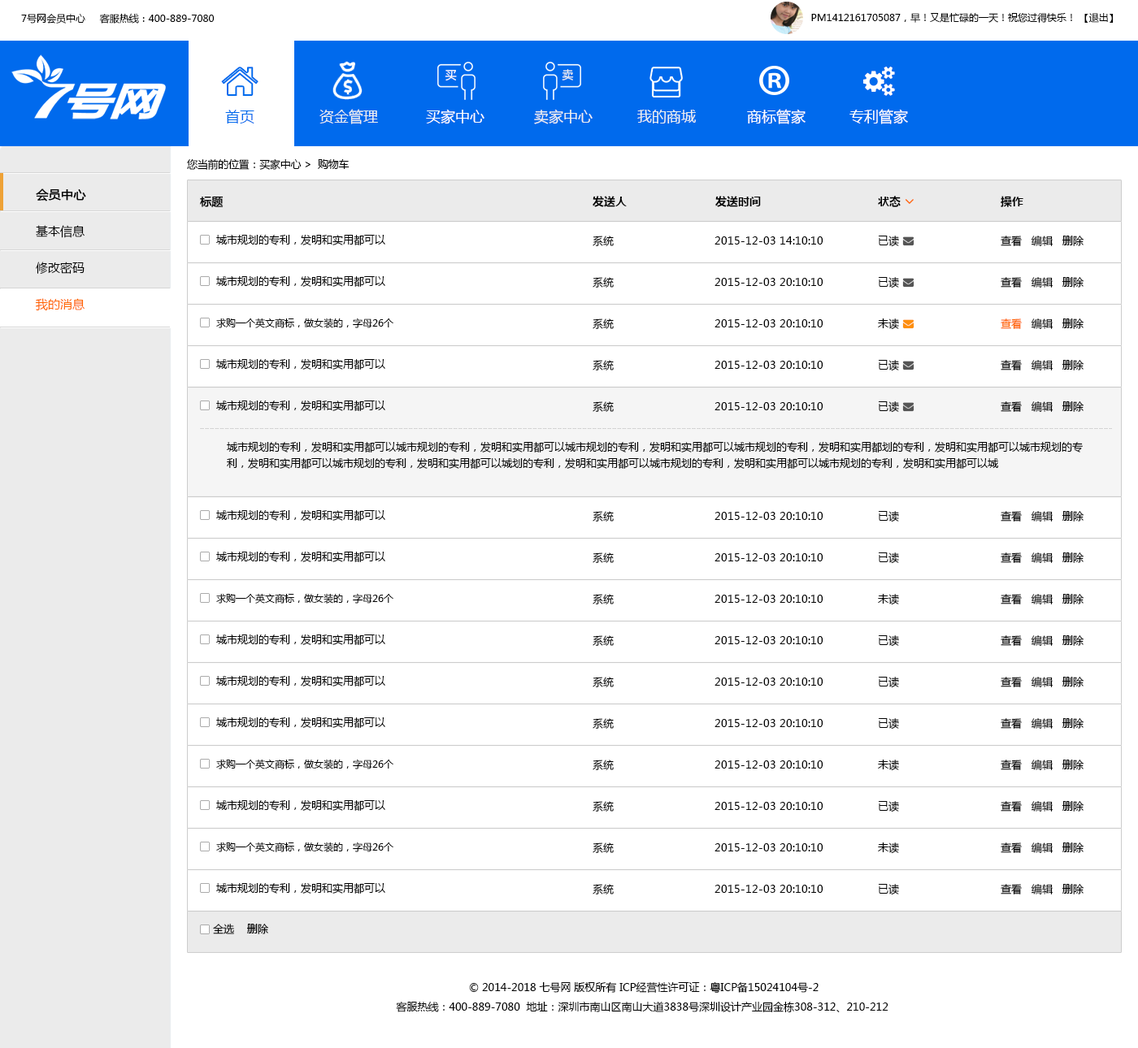
<style>
.page{position:relative;width:1138px;height:1048px;background:#ffffff}
.page>*{position:absolute;margin:0}
.t1{font:9.8px "MicrosoftYaHei";color:#000000}
.t2{font:11.4px "MicrosoftYaHei";color:#ffffff}
.t3{font:11.4px "MicrosoftYaHei";color:#ecf0f1}
.t4{font:14.6px "MicrosoftYaHei";color:#006aed}
.t5{font:14.6px "MicrosoftYaHei";color:#ecf0f1}
.t6{font:14.6px "MicrosoftYaHei";color:#ffffff}
.t7{font:10.6px "MicrosoftYaHei";letter-spacing:-0.02em;color:#000000}
.t8{font:12.2px/36.6px "MicrosoftYaHei";color:#000000}
.t9{font:12.2px/36.6px "MicrosoftYaHei";color:#000000;font-weight:bold}
.t10{font:12.2px/36.6px "MicrosoftYaHei";color:#ff6600}
.t11{font:11.4px "MicrosoftYaHei";color:#000000;font-weight:bold}
.t12{font:11.4px "MicrosoftYaHei-Bold";color:#000000}
.t13{font:10.6px "MicrosoftYaHei";color:#000000}
.t14{font:10.6px "MicrosoftYaHei";color:#ff6600}
.t15{font:10.6px/16.3px "MicrosoftYaHei";color:#000000}
.t16{font:10.6px/19.5px "MicrosoftYaHei";color:#000000}
</style>
<div class="page">
<p class="t1" style="left:21px;top:13px;width:194px;height:11px">7号网会员中心     客服热线：400-889-7080</p>
<p class="t1" style="left:811px;top:13px;width:302px;height:10px">PM1412161705087，早！又是忙碌的一天！祝您过得快乐！ 【退出】</p>
<p class="t2" style="left:444px;top:70px;width:13px;height:11px">买</p>
<p class="t3" style="left:561px;top:69px;width:13px;height:11px">卖</p>
<p class="t4" style="left:225px;top:110px;width:29px;height:14px">首页</p>
<p class="t5" style="left:319px;top:109px;width:59px;height:15px">资金管理</p>
<p class="t6" style="left:426px;top:109px;width:58px;height:15px">买家中心</p>
<p class="t5" style="left:534px;top:109px;width:58px;height:15px">卖家中心</p>
<p class="t5" style="left:637px;top:110px;width:59px;height:14px">我的商城</p>
<p class="t6" style="left:747px;top:109px;width:58px;height:15px">商标管家</p>
<p class="t6" style="left:849px;top:109px;width:59px;height:15px">专利管家</p>
<p class="t7" style="left:187px;top:158px;width:162px;height:12px">您当前的位置：买家中心 &gt;  购物车</p>
<p class="t8" style="left:35px;top:189px;width:51px;height:122px"><span class="t9">会员中心<br></span>基本信息<br>修改密码<br><span class="t10">我的消息</span></p>
<p class="t11" style="left:200px;top:196px;width:23px;height:12px">标题</p>
<p class="t12" style="left:592px;top:196px;width:34px;height:11px">发送人</p>
<p class="t12" style="left:715px;top:196px;width:46px;height:11px">发送时间</p>
<p class="t12" style="left:878px;top:196px;width:22px;height:11px">状态</p>
<p class="t12" style="left:1000px;top:196px;width:23px;height:11px">操作</p>
<p class="t13" style="left:216px;top:234px;width:169px;height:11px">城市规划的专利，发明和实用都可以</p>
<p class="t13" style="left:592px;top:236px;width:21px;height:10px">系统</p>
<p class="t13" style="left:714px;top:236px;width:109px;height:9px">2015-12-03 14:10:10</p>
<p class="t13" style="left:878px;top:236px;width:21px;height:11px">已读</p>
<p class="t13" style="left:1000px;top:236px;width:83px;height:10px">查看   编辑   删除</p>
<p class="t13" style="left:216px;top:275px;width:169px;height:12px"><span class="t14"> </span>城市规划的专利，发明和实用都可以</p>
<p class="t13" style="left:592px;top:277px;width:21px;height:11px">系统</p>
<p class="t13" style="left:714px;top:278px;width:109px;height:8px">2015-12-03 20:10:10</p>
<p class="t13" style="left:878px;top:277px;width:21px;height:11px">已读</p>
<p class="t13" style="left:1000px;top:277px;width:83px;height:11px">查看   编辑   删除</p>
<p class="t1" style="left:216px;top:318px;width:177px;height:10px"><span class="t14"> </span>求购一个英文商标，做女装的，字母26个</p>
<p class="t13" style="left:592px;top:319px;width:21px;height:10px">系统</p>
<p class="t13" style="left:714px;top:319px;width:109px;height:8px">2015-12-03 20:10:10</p>
<p class="t13" style="left:878px;top:319px;width:21px;height:11px">未读</p>
<p class="t13" style="left:1000px;top:319px;width:83px;height:10px"><span class="t14">查看 </span>  编辑   删除</p>
<p class="t13" style="left:216px;top:358px;width:169px;height:12px"><span class="t14"> </span>城市规划的专利，发明和实用都可以</p>
<p class="t13" style="left:592px;top:360px;width:21px;height:11px">系统</p>
<p class="t13" style="left:714px;top:361px;width:109px;height:8px">2015-12-03 20:10:10</p>
<p class="t13" style="left:878px;top:360px;width:21px;height:11px">已读</p>
<p class="t13" style="left:1000px;top:360px;width:83px;height:11px">查看   编辑   删除</p>
<p class="t13" style="left:216px;top:400px;width:169px;height:11px"><span class="t14"> </span>城市规划的专利，发明和实用都可以</p>
<p class="t13" style="left:592px;top:401px;width:21px;height:11px">系统</p>
<p class="t13" style="left:878px;top:401px;width:21px;height:12px">已读</p>
<p class="t13" style="left:1000px;top:401px;width:83px;height:11px">查看   编辑   删除</p>
<p class="t13" style="left:714px;top:402px;width:109px;height:8px">2015-12-03 20:10:10</p>
<p class="t15" style="left:227px;top:441px;width:855px;height:28px">城市规划的专利，发明和实用都可以城市规划的专利，发明和实用都可以城市规划的专利，发明和实用都可以城市规划的专利，发明和实用都划的专利，发明和实用都可以城市规划的专利，发明和实用都可以城市规划的专利，发明和实用都可以城划的专利，发明和实用都可以城市规划的专利，发明和实用都可以城市规划的专利，发明和实用都可以城</p>
<p class="t13" style="left:216px;top:509px;width:169px;height:12px">城市规划的专利，发明和实用都可以</p>
<p class="t13" style="left:592px;top:511px;width:21px;height:11px">系统</p>
<p class="t13" style="left:714px;top:512px;width:109px;height:8px">2015-12-03 20:10:10</p>
<p class="t13" style="left:878px;top:511px;width:21px;height:11px">已读</p>
<p class="t13" style="left:1000px;top:511px;width:83px;height:11px">查看   编辑   删除</p>
<p class="t13" style="left:216px;top:551px;width:169px;height:11px"><span class="t14"> </span>城市规划的专利，发明和实用都可以</p>
<p class="t13" style="left:592px;top:553px;width:21px;height:10px">系统</p>
<p class="t13" style="left:714px;top:553px;width:109px;height:8px">2015-12-03 20:10:10</p>
<p class="t13" style="left:878px;top:553px;width:21px;height:11px">已读</p>
<p class="t13" style="left:1000px;top:553px;width:83px;height:10px">查看   编辑   删除</p>
<p class="t1" style="left:216px;top:593px;width:177px;height:11px"><span class="t14"> </span>求购一个英文商标，做女装的，字母26个</p>
<p class="t13" style="left:592px;top:594px;width:21px;height:11px">系统</p>
<p class="t13" style="left:878px;top:594px;width:21px;height:11px">未读</p>
<p class="t13" style="left:1000px;top:594px;width:83px;height:11px">查看   编辑   删除</p>
<p class="t13" style="left:714px;top:595px;width:109px;height:8px">2015-12-03 20:10:10</p>
<p class="t13" style="left:216px;top:634px;width:169px;height:11px"><span class="t14"> </span>城市规划的专利，发明和实用都可以</p>
<p class="t13" style="left:592px;top:635px;width:21px;height:11px">系统</p>
<p class="t13" style="left:714px;top:636px;width:109px;height:8px">2015-12-03 20:10:10</p>
<p class="t13" style="left:878px;top:635px;width:21px;height:12px">已读</p>
<p class="t13" style="left:1000px;top:635px;width:83px;height:11px">查看   编辑   删除</p>
<p class="t13" style="left:216px;top:675px;width:169px;height:12px">城市规划的专利，发明和实用都可以</p>
<p class="t13" style="left:592px;top:677px;width:21px;height:10px">系统</p>
<p class="t13" style="left:714px;top:678px;width:109px;height:8px">2015-12-03 20:10:10</p>
<p class="t13" style="left:878px;top:677px;width:21px;height:11px">已读</p>
<p class="t13" style="left:1000px;top:677px;width:83px;height:10px">查看   编辑   删除</p>
<p class="t13" style="left:216px;top:717px;width:169px;height:11px"><span class="t14"> </span>城市规划的专利，发明和实用都可以</p>
<p class="t13" style="left:592px;top:718px;width:21px;height:11px">系统</p>
<p class="t13" style="left:714px;top:719px;width:109px;height:8px">2015-12-03 20:10:10</p>
<p class="t13" style="left:878px;top:718px;width:21px;height:12px">已读</p>
<p class="t13" style="left:1000px;top:718px;width:83px;height:11px">查看   编辑   删除</p>
<p class="t1" style="left:216px;top:759px;width:177px;height:10px"><span class="t14"> </span>求购一个英文商标，做女装的，字母26个</p>
<p class="t13" style="left:592px;top:760px;width:21px;height:10px">系统</p>
<p class="t13" style="left:714px;top:761px;width:109px;height:8px">2015-12-03 20:10:10</p>
<p class="t13" style="left:878px;top:760px;width:21px;height:11px">未读</p>
<p class="t13" style="left:1000px;top:760px;width:83px;height:10px">查看   编辑   删除</p>
<p class="t13" style="left:216px;top:800px;width:169px;height:11px"><span class="t14"> </span>城市规划的专利，发明和实用都可以</p>
<p class="t13" style="left:592px;top:801px;width:21px;height:11px">系统</p>
<p class="t13" style="left:714px;top:802px;width:109px;height:8px">2015-12-03 20:10:10</p>
<p class="t13" style="left:878px;top:801px;width:21px;height:12px">已读</p>
<p class="t13" style="left:1000px;top:801px;width:83px;height:11px">查看   编辑   删除</p>
<p class="t1" style="left:216px;top:842px;width:177px;height:10px"><span class="t14"> </span>求购一个英文商标，做女装的，字母26个</p>
<p class="t13" style="left:592px;top:843px;width:21px;height:10px">系统</p>
<p class="t13" style="left:714px;top:843px;width:109px;height:9px">2015-12-03 20:10:10</p>
<p class="t13" style="left:878px;top:843px;width:21px;height:11px">未读</p>
<p class="t13" style="left:1000px;top:843px;width:83px;height:10px">查看   编辑   删除</p>
<p class="t13" style="left:216px;top:882px;width:169px;height:12px"><span class="t14"> </span>城市规划的专利，发明和实用都可以</p>
<p class="t13" style="left:592px;top:884px;width:21px;height:11px">系统</p>
<p class="t13" style="left:714px;top:885px;width:109px;height:8px">2015-12-03 20:10:10</p>
<p class="t13" style="left:878px;top:884px;width:21px;height:11px">已读</p>
<p class="t13" style="left:1000px;top:884px;width:83px;height:11px">查看   编辑   删除</p>
<p class="t13" style="left:213px;top:924px;width:55px;height:10px">全选    删除</p>
<p class="t16" style="left:396px;top:982px;width:492px;height:30px;text-align:center">© 2014-2018 七号网 版权所有 ICP经营性许可证：粤ICP备15024104号-2<br>客服热线：400-889-7080  地址：深圳市南山区南山大道3838号深圳设计产业园金栋308-312、210-212</p>
</div>
